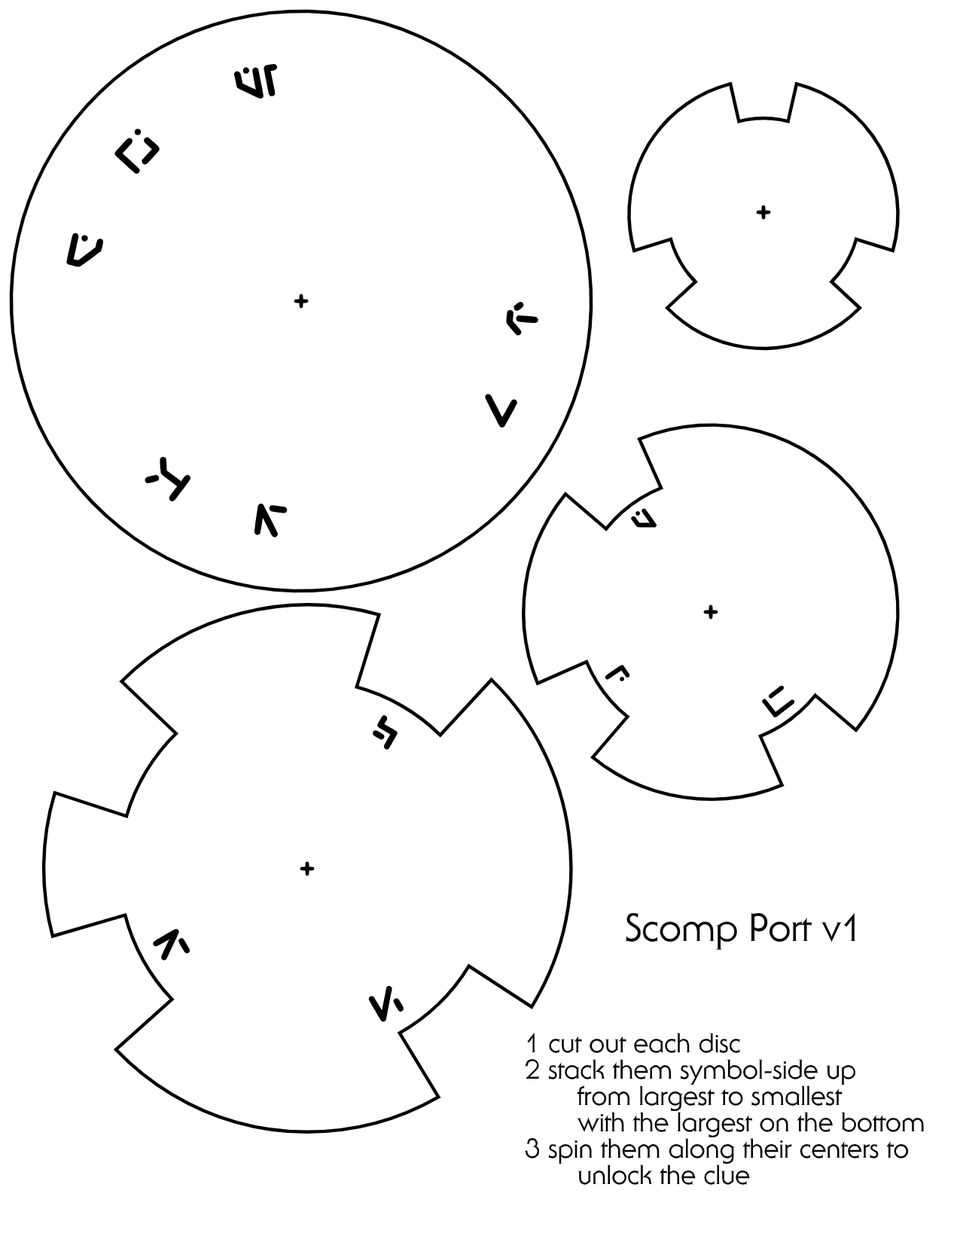
<style>
.page{position:relative;width:960px;height:1242px;background:#ffffff}
.page>*{position:absolute;margin:0}
.t1{font:48.2px "Aurebesh_droid-Regular";letter-spacing:-0.13em;color:#000000}
.t2{font:48.2px "Aurebesh_droid-Regular";letter-spacing:0.04em;color:#000000}
.t3{font:48.2px "Aurebesh_droid-Regular";color:#000000}
.t4{font:48.2px "Aurebesh_droid-Regular";letter-spacing:-0.09em;color:#000000}
.t5{font:33.9px "Aurebesh_droid-Regular";letter-spacing:0.016em;color:#000000}
.t6{font:33.9px "Aurebesh_droid-Regular";letter-spacing:-0.02em;color:#000000}
.t7{font:44.4px "Aurebesh_droid-Regular";letter-spacing:0.016em;color:#000000}
.t8{font:44.4px "Aurebesh_droid-Regular";letter-spacing:-0.02em;color:#000000}
.t9{font:37.6px "AndroclesOpti-Regular";color:#000000}
.t10{font:26.4px/26.4px "AndroclesOpti-Regular";color:#000000}
</style>
<div class="page">
<p class="t1" style="left:66px;top:64px;width:472px;height:474px;rotate:151deg"><span class="t2">e   </span>tR  <span class="t3">s</span><span class="t4">A  </span><span class="t3">qw</span></p>
<p class="t5" style="left:605px;top:508px;width:190px;height:209px;rotate:-53deg">k   l   <span class="t6">p</span></p>
<p class="t7" style="left:153px;top:715px;width:251px;height:307px;rotate:43deg">s    c   <span class="t8">n</span></p>
<p class="t9" style="left:626px;top:912px;width:229px;height:38px">Scomp Port v1</p>
<p class="t10" style="left:525px;top:1033px;width:400px;height:152px">1 cut out each disc<br>2 stack them symbol-side up<br> from largest to smallest<br> with the largest on the bottom<br>3 spin them along their centers to<br> unlock the clue</p>
</div>
